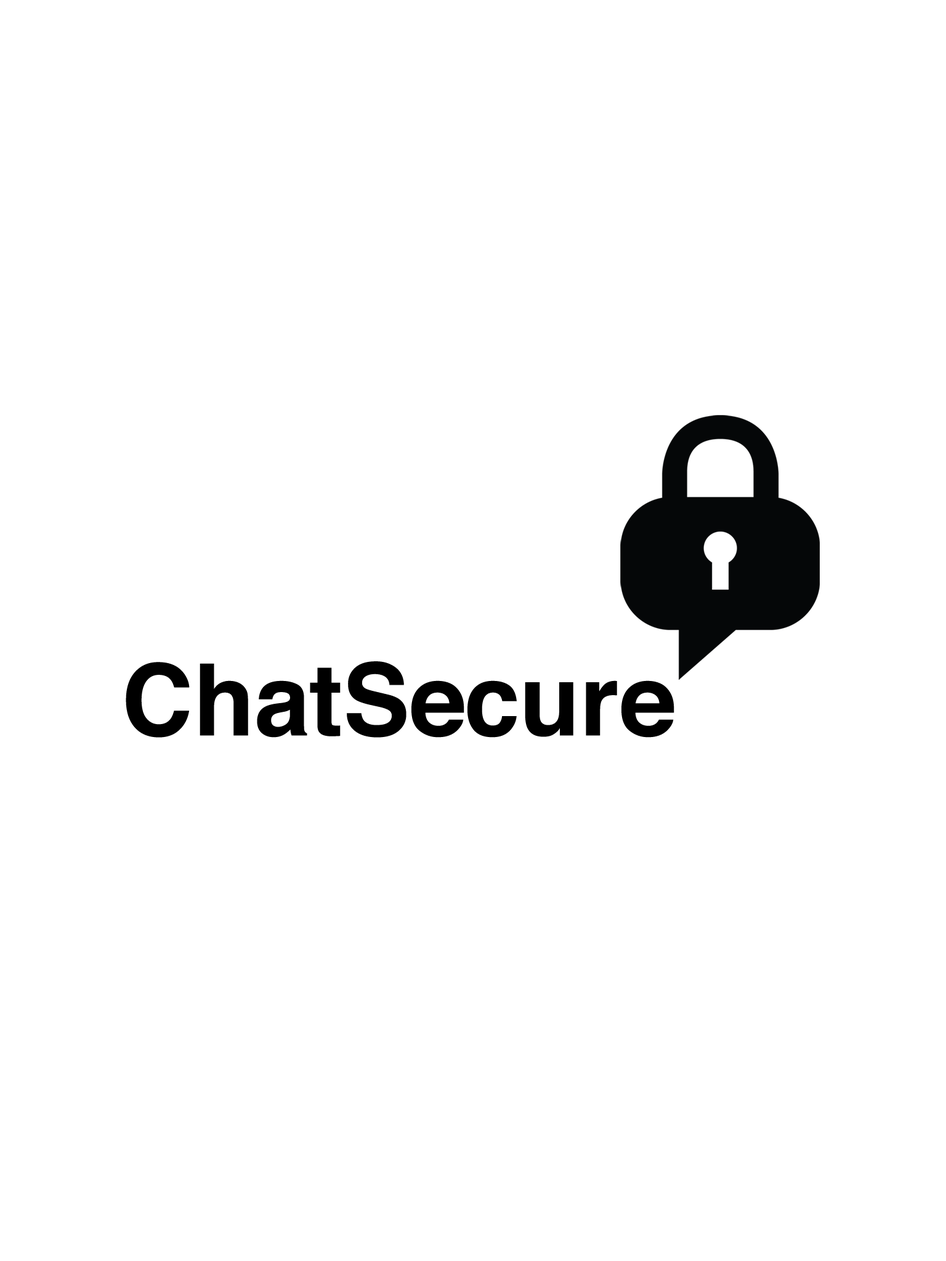
<style>
.page{position:relative;width:946px;height:1261px;background:#ffffff}
.page>*{position:absolute;margin:0}
.t1{font:99.8px "Helvetica-Bold";color:#000000}
</style>
<div class="page">
<p class="t1" style="left:126px;top:661px;width:548px;height:77px">ChatSecure</p>
</div>
